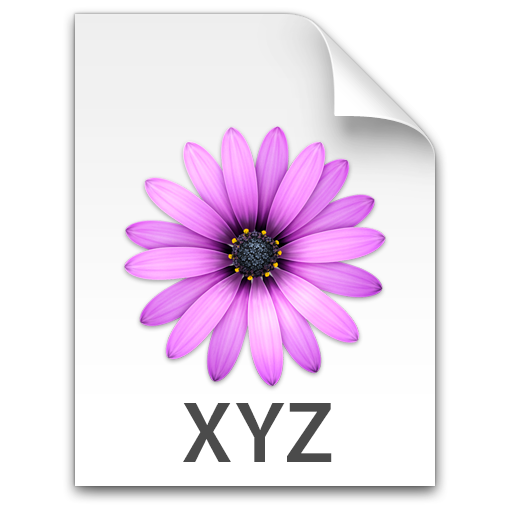
<style>
.page{position:relative;width:512px;height:512px;background:#ffffff}
.page>*{position:absolute;margin:0}
.t1{font:86.8px "MyriadPro-Semibold";letter-spacing:0.02em;color:#4b4b4b}
</style>
<div class="page">
<p class="t1" style="left:183px;top:403px;width:149px;height:59px">XYZ</p>
</div>
